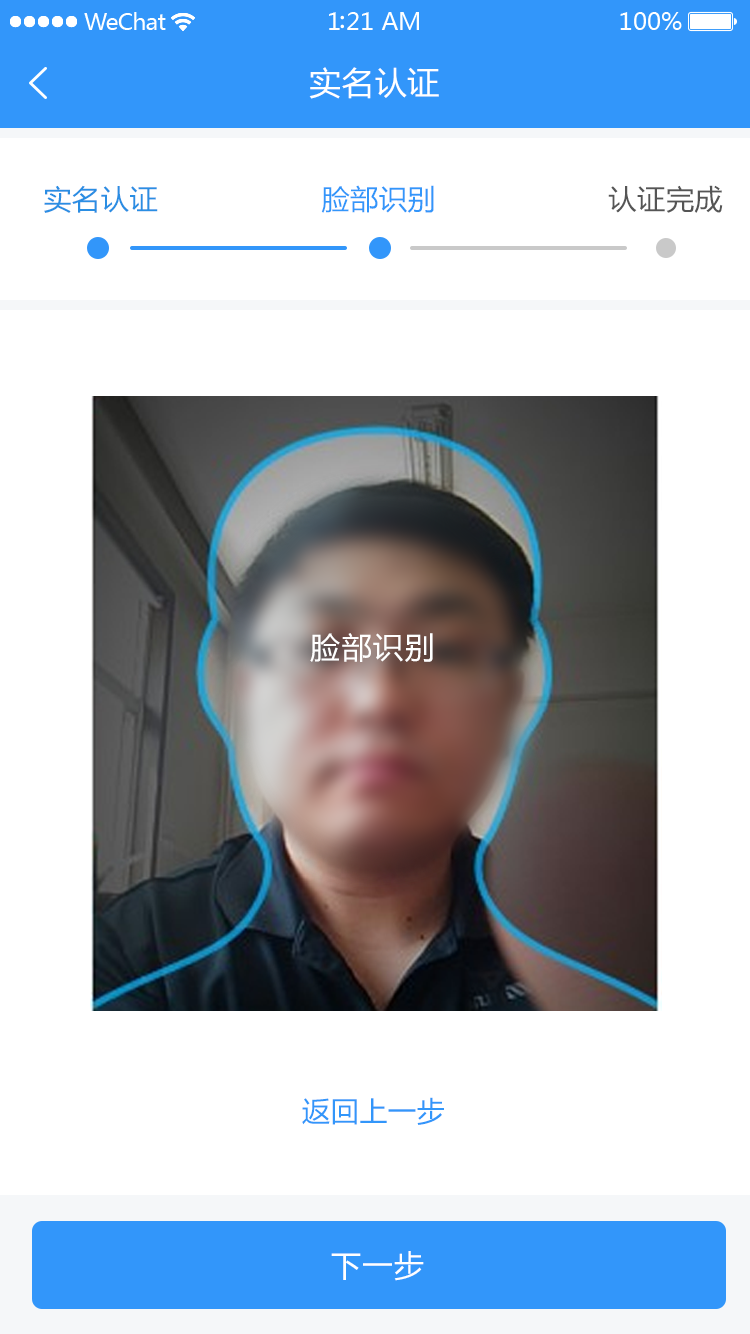
<style>
.page{position:relative;width:750px;height:1334px;background:#ffffff}
.page>*{position:absolute;margin:0}
.t1{font:32px "MicrosoftYaHei";letter-spacing:0.025em;color:#ffffff}
.t2{font:28px "MicrosoftYaHei";letter-spacing:0.025em;color:#2a8ee3}
.t3{font:28px "MicrosoftYaHei";letter-spacing:0.025em;color:#3296fa}
.t4{font:28px "MicrosoftYaHei";letter-spacing:0.025em;color:#555555}
.t5{font:30px "MicrosoftYaHei";letter-spacing:0.05em;color:#ffffff}
</style>
<div class="page">
<p class="t1" style="left:309px;top:67px;width:130px;height:32px">实名认证</p>
<p class="t2" style="left:44px;top:185px;width:114px;height:28px">实名认证</p>
<p class="t3" style="left:321px;top:185px;width:113px;height:28px">脸部识别</p>
<p class="t4" style="left:608px;top:185px;width:115px;height:28px">认证完成</p>
<p class="t5" style="left:310px;top:633px;width:123px;height:29px">脸部识别</p>
<p class="t3" style="left:302px;top:1097px;width:142px;height:28px">返回上一步</p>
<p class="t5" style="left:331px;top:1251px;width:93px;height:30px">下一步</p>
</div>
